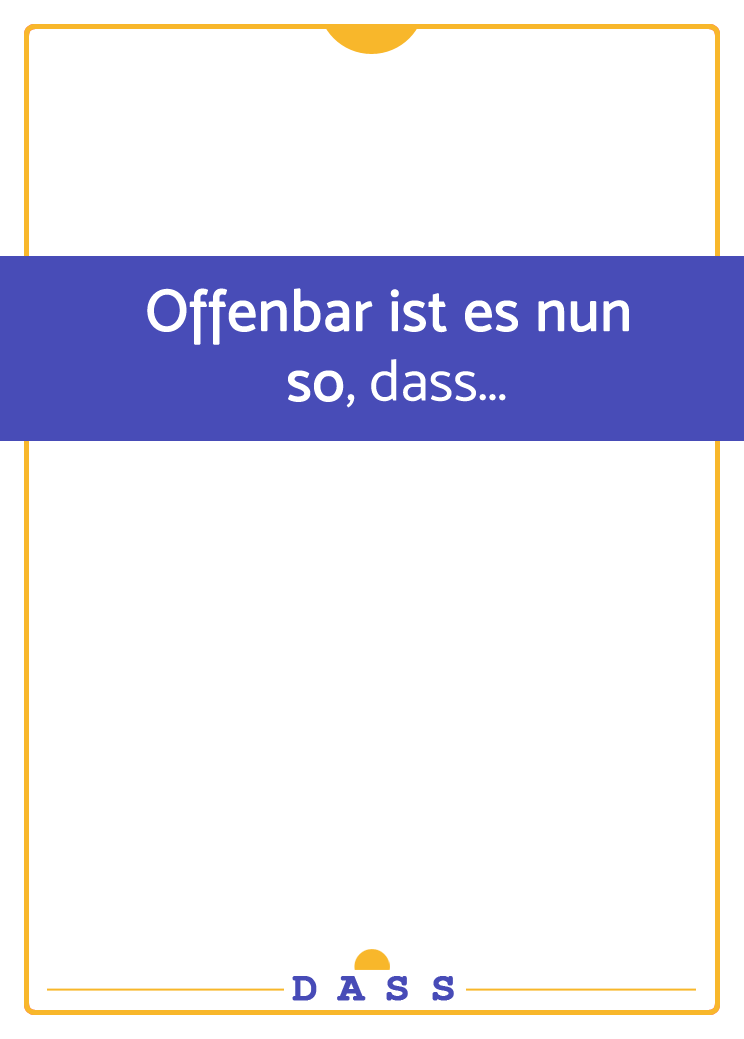
<style>
.page{position:relative;width:744px;height:1039px;background:#ffffff}
.page>*{position:absolute;margin:0}
.t1{font:58.3px "MoskNormal400";color:#ffffff;font-weight:bold}
.t2{font:58.3px "MoskNormal400";color:#ffffff}
.t3{font:41.7px "CourierNewPS-BoldMT";letter-spacing:0.48em;color:#484bb7;font-weight:bold}
</style>
<div class="page">
<p class="t1" style="left:147px;top:288px;width:482px;height:120px;text-align:center">Offenbar ist es nun <br>so<span class="t2">, dass...</span></p>
<p class="t3" style="left:292px;top:976px;width:162px;height:25px">DASS</p>
</div>
